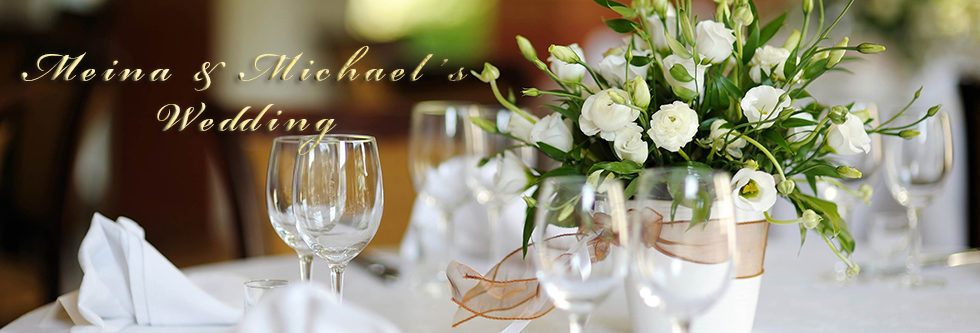
<style>
.page{position:relative;width:980px;height:333px}
.page>*{position:absolute;margin:0}
.t1{font:60px/25px "BickhamScriptPro-Bold";letter-spacing:0.1em;scale:0.96 1}
</style>
<div class="page">
<p class="t1" style="left:21px;top:46px;width:447px;height:109px;text-align:center">Meina &amp; Michael’s<br><br>Wedding</p>
</div>
